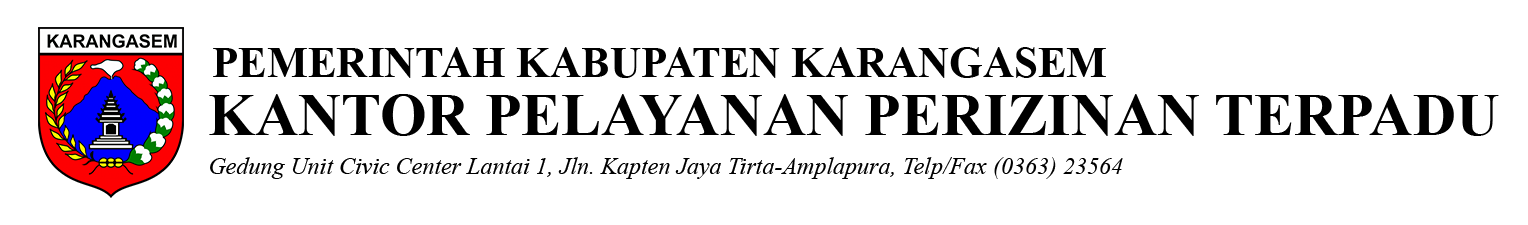
<style>
.page{position:relative;width:1528px;height:225px;background:#ffffff}
.page>*{position:absolute;margin:0}
.t1{font:43.1px "TimesNewRomanPS-BoldMT";color:#000000}
.t2{font:59.8px "TimesNewRomanPS-BoldMT";color:#000000}
.t3{font:24px "TimesNewRomanPS-ItalicMT";color:#000000}
</style>
<div class="page">
<p class="t1" style="left:213px;top:47px;width:893px;height:31px">PEMERINTAH KABUPATEN KARANGASEM</p>
<p class="t2" style="left:209px;top:94px;width:1290px;height:42px">KANTOR PELAYANAN PERIZINAN TERPADU</p>
<p class="t3" style="left:210px;top:157px;width:913px;height:22px">Gedung Unit Civic Center Lantai 1, Jln. Kapten Jaya Tirta-Amplapura, Telp/Fax (0363) 23564</p>
</div>
